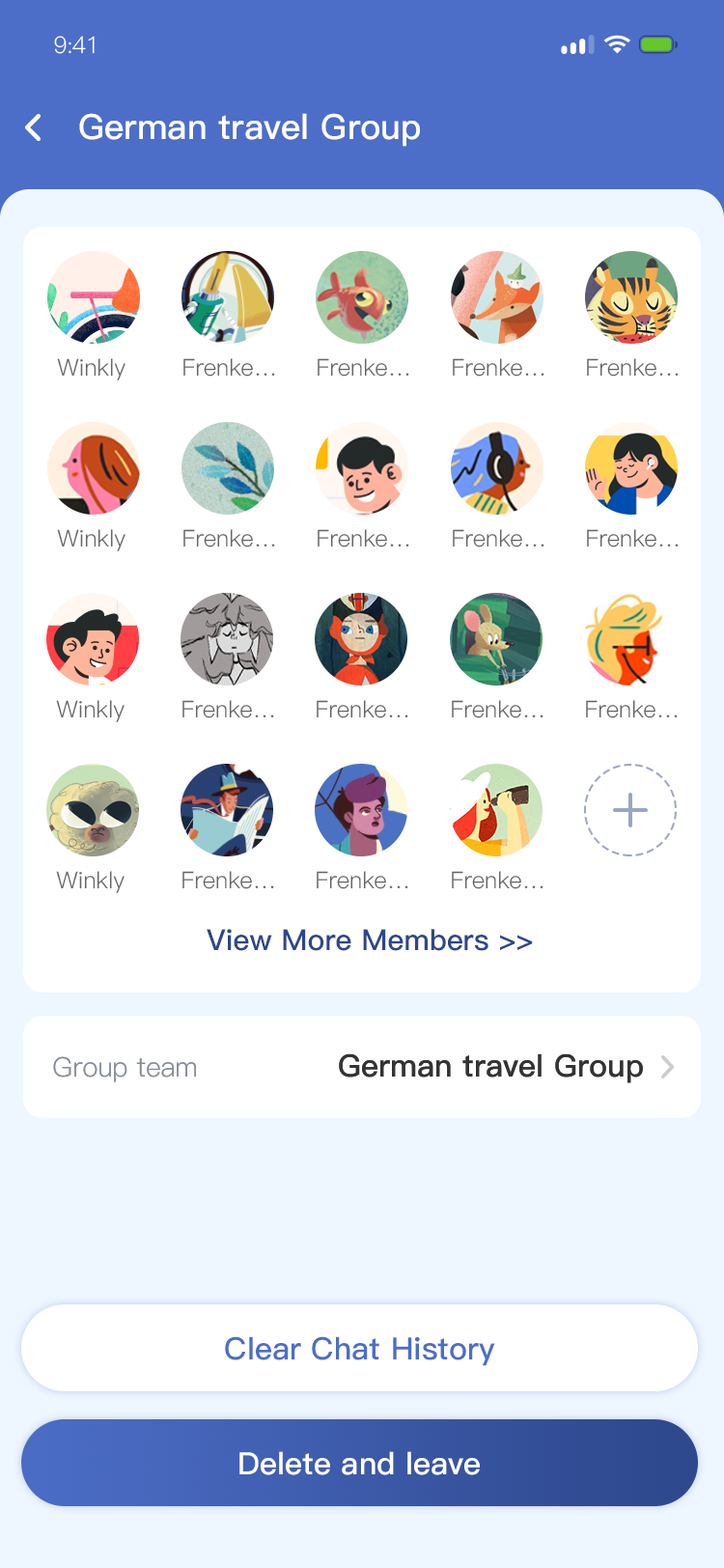
<style>
.page{position:relative;width:724px;height:1568px;background:#ffffff}
.page>*{position:absolute;margin:0}
.t1{font:23.2px "PingFang-SC-Regular";letter-spacing:-0.025em;color:#ffffff}
.t2{font:34.8px "PingFang-SC-Bold";color:#ffffff}
.t3{font:34.8px "PingFang-SC-Bold";color:#ffffff;text-transform:uppercase}
.t4{font:23.2px "PingFang-SC-Regular";color:#666666}
.t5{font:29px "PingFang-SC-Bold";color:#2d478b}
.t6{font:27px "PingFang-SC-Regular";color:#878c9a}
.t7{font:27px "PingFang-SC-Regular";color:#878c9a;text-transform:uppercase}
.t8{font:30.9px "PingFang-SC-Bold";color:#333333}
.t9{font:30.9px "PingFang-SC-Bold";color:#333333;text-transform:uppercase}
.t10{font:30.9px "PingFang-SC-Bold";color:#4c6ec8}
.t11{font:30.9px "PingFang-SC-Bold";color:#ffffff}
</style>
<div class="page">
<p class="t1" style="left:54px;top:36px;width:41px;height:18px">9:41</p>
<p class="t2" style="left:79px;top:113px;width:341px;height:34px"><span class="t3">G</span>erman travel Group</p>
<p class="t4" style="left:57px;top:358px;width:69px;height:22px">Winkly</p>
<p class="t4" style="left:183px;top:358px;width:92px;height:19px">Frenke…</p>
<p class="t4" style="left:318px;top:358px;width:91px;height:19px">Frenke…</p>
<p class="t4" style="left:453px;top:358px;width:92px;height:19px">Frenke…</p>
<p class="t4" style="left:587px;top:358px;width:92px;height:19px">Frenke…</p>
<p class="t4" style="left:57px;top:529px;width:69px;height:22px">Winkly</p>
<p class="t4" style="left:183px;top:529px;width:92px;height:18px">Frenke…</p>
<p class="t4" style="left:318px;top:529px;width:91px;height:18px">Frenke…</p>
<p class="t4" style="left:453px;top:529px;width:92px;height:18px">Frenke…</p>
<p class="t4" style="left:587px;top:529px;width:92px;height:18px">Frenke…</p>
<p class="t4" style="left:56px;top:700px;width:69px;height:22px">Winkly</p>
<p class="t4" style="left:182px;top:700px;width:92px;height:18px">Frenke…</p>
<p class="t4" style="left:317px;top:700px;width:91px;height:18px">Frenke…</p>
<p class="t4" style="left:452px;top:700px;width:92px;height:18px">Frenke…</p>
<p class="t4" style="left:586px;top:700px;width:92px;height:18px">Frenke…</p>
<p class="t4" style="left:56px;top:871px;width:69px;height:22px">Winkly</p>
<p class="t4" style="left:182px;top:871px;width:92px;height:18px">Frenke…</p>
<p class="t4" style="left:317px;top:871px;width:91px;height:18px">Frenke…</p>
<p class="t4" style="left:452px;top:871px;width:92px;height:18px">Frenke…</p>
<p class="t5" style="left:207px;top:929px;width:326px;height:22px">View More Members &gt;&gt;</p>
<p class="t6" style="left:53px;top:1056px;width:143px;height:26px"><span class="t7">G</span>roup team</p>
<p class="t8" style="left:339px;top:1053px;width:304px;height:30px"><span class="t9">G</span>erman travel Group</p>
<p class="t10" style="left:225px;top:1336px;width:270px;height:30px">Clear Chat History</p>
<p class="t11" style="left:239px;top:1451px;width:241px;height:24px">Delete and leave</p>
</div>
